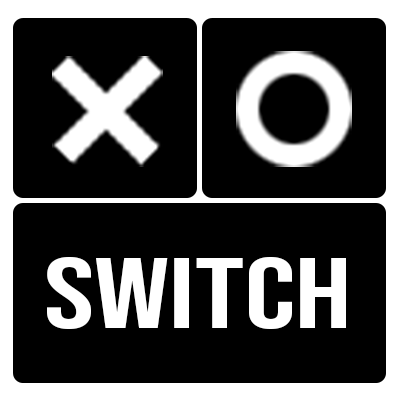
<style>
.page{position:relative;width:400px;height:400px;background:#000000}
.page>*{position:absolute;margin:0}
.t1{font:100px "BebasNeue-Regular";color:#ffffff;scale:1.35 1}
</style>
<div class="page">
<p class="t1" style="left:47px;top:257px;width:299px;height:72px">SWITCH</p>
</div>
